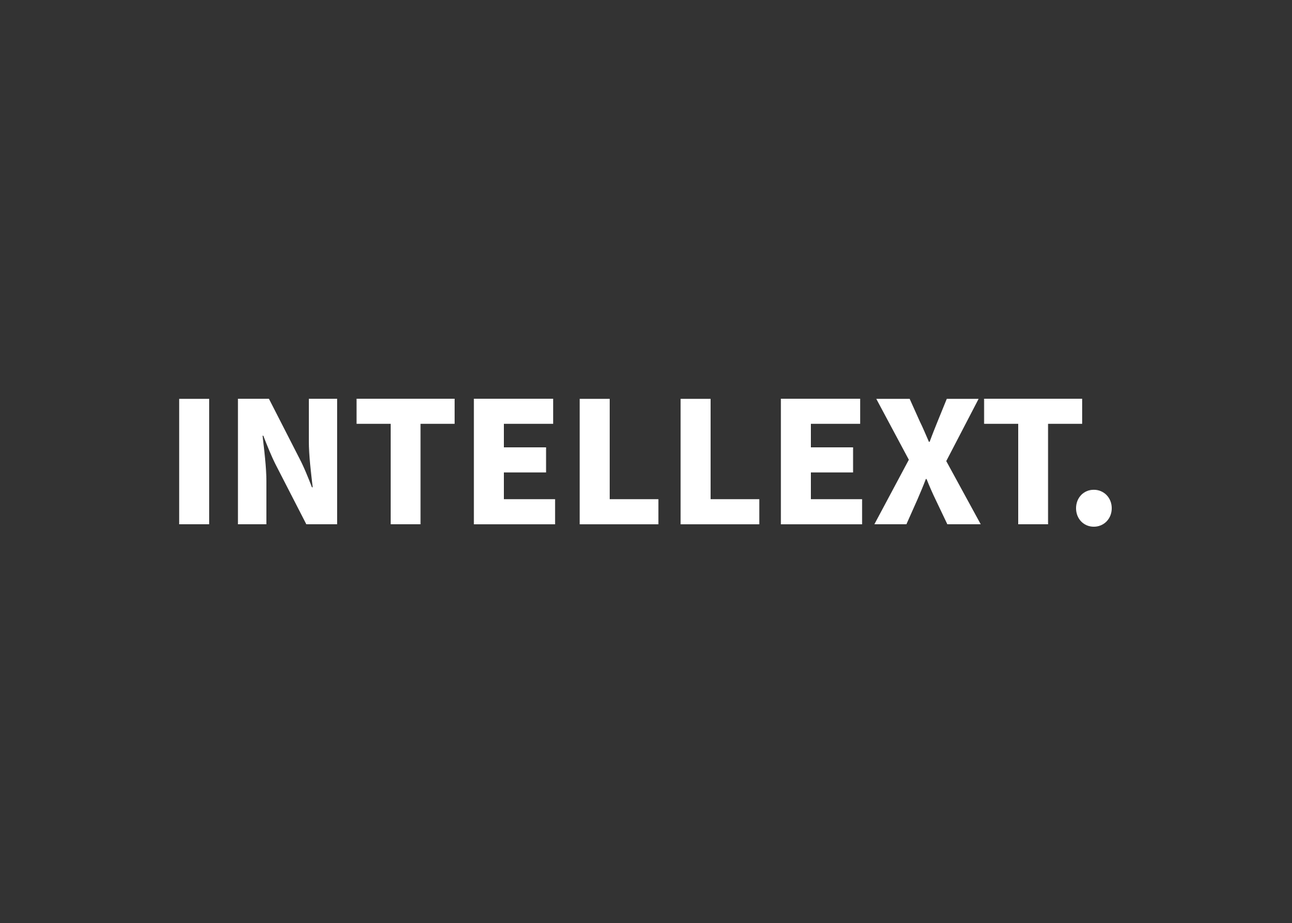
<style>
.page{position:relative;width:1292px;height:923px;background:#333333}
.page>*{position:absolute;margin:0}
.t1{font:192.6px "SourceSansPro-Bold";color:#ffffff}
</style>
<div class="page">
<p class="t1" style="left:179px;top:399px;width:933px;height:128px">INTELLEXT.</p>
</div>
